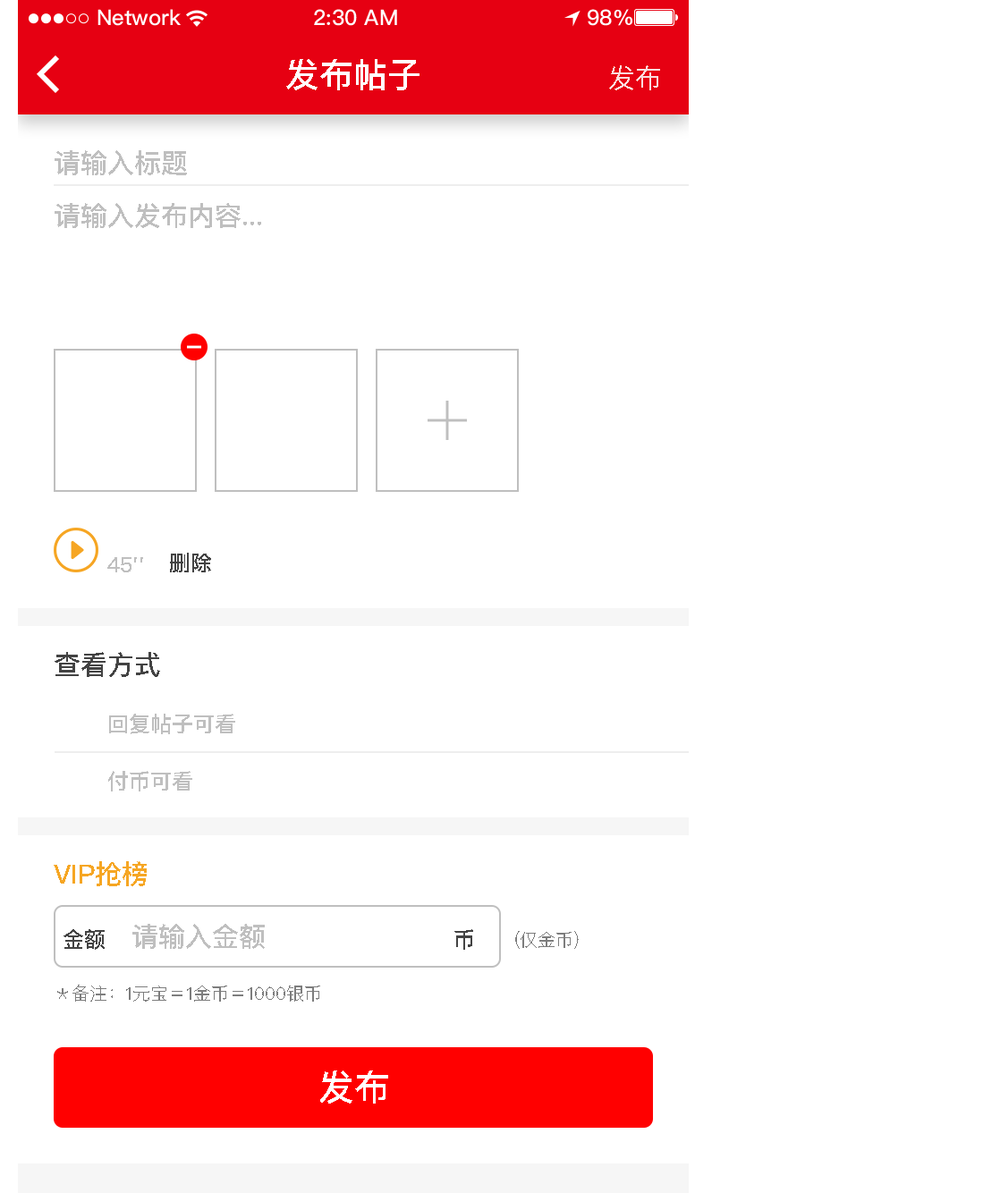
<style>
.page{position:relative;width:1000px;height:1193px;background:#ffffff}
.page>*{position:absolute;margin:0}
.t1{font:34px "PingFangSC-Medium";color:#ffffff;text-transform:uppercase}
.t2{font:26.8px "PingFangSC-Regular";color:#faddde;text-transform:uppercase}
.t3{font:26.8px "PingFangSC-Medium";color:#bfbfbf;text-transform:uppercase}
.t4{font:21.5px "PingFangSC-Medium";color:#bfbfbf;text-transform:uppercase}
.t5{font:21.5px "PingFangSC-Medium";color:#434343;text-transform:uppercase}
.t6{font:26.8px "PingFangSC-Medium";color:#434343;text-transform:uppercase}
.t7{font:26.8px "PingFangSC-Medium";color:#f6a623;text-transform:uppercase}
.t8{font:17.9px "PingFangSC-Regular";color:#7d7d7d;text-transform:uppercase}
.t9{font:35.8px "PingFangSC-Medium";color:#ffffff;text-transform:uppercase}
</style>
<div class="page">
<p class="t1" style="left:286px;top:59px;width:133px;height:31px">发布帖子</p>
<p class="t2" style="left:609px;top:65px;width:51px;height:25px">发布</p>
<p class="t3" style="left:55px;top:150px;width:132px;height:25px">请输入标题</p>
<p class="t3" style="left:55px;top:203px;width:206px;height:25px">请输入发布内容...</p>
<p class="t4" style="left:107px;top:557px;width:36px;height:15px">45''</p>
<p class="t5" style="left:170px;top:553px;width:41px;height:19px">删除</p>
<p class="t6" style="left:55px;top:652px;width:105px;height:25px">查看方式</p>
<p class="t4" style="left:109px;top:714px;width:126px;height:20px">回复帖子可看</p>
<p class="t4" style="left:108px;top:771px;width:84px;height:20px">付币可看</p>
<p class="t7" style="left:54px;top:861px;width:93px;height:25px">vip抢榜</p>
<p class="t5" style="left:63px;top:929px;width:42px;height:21px">金额</p>
<p class="t3" style="left:132px;top:924px;width:133px;height:25px">请输入金额</p>
<p class="t5" style="left:454px;top:929px;width:19px;height:21px">币</p>
<p class="t8" style="left:515px;top:931px;width:64px;height:18px">(仅金币)</p>
<p class="t8" style="left:57px;top:984px;width:263px;height:17px">＊备注：1元宝＝1金币＝1000银币</p>
<p class="t9" style="left:320px;top:1070px;width:68px;height:33px">发布</p>
</div>
